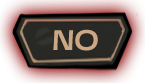
<style>
.page{position:relative;width:145px;height:83px}
.page>*{position:absolute;margin:0}
.t1{font:30px "037-CAI978";color:#cba783}
</style>
<div class="page">
<p class="t1" style="left:53px;top:29px;width:45px;height:22px">NO</p>
</div>
